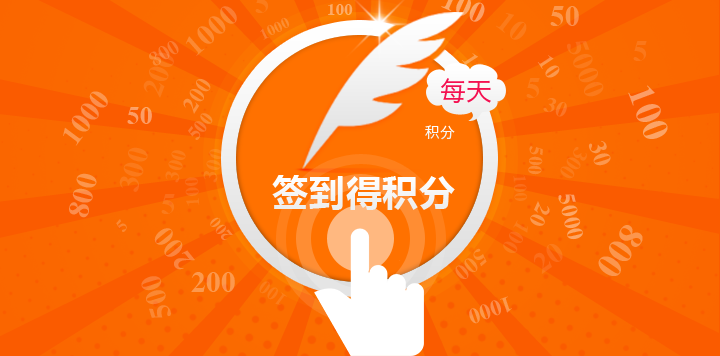
<style>
.page{position:relative;width:720px;height:356px}
.page>*{position:absolute;margin:0}
.t1{font:29px "CTLaoSongSJ";letter-spacing:0.02em;color:#fc8933}
.t2{font:29px "CTLaoSongSJ";letter-spacing:0.02em;color:#fb7b1a}
.t3{font:16.7px "CTLaoSongSJ";letter-spacing:0.02em;color:#fdab66}
.t4{font:29px "CTLaoSongSJ";letter-spacing:0.02em;color:#fc974d}
.t5{font:15px "CTLaoSongSJ";letter-spacing:0.02em;color:#fc8e33}
.t6{font:29px "CTLaoSongSJ";letter-spacing:0.02em;color:#fb7a1a}
.t7{font:20.6px "CTLaoSongSJ";letter-spacing:0.02em;color:#fb7c33}
.t8{font:29px "CTLaoSongSJ";letter-spacing:0.02em;color:#fb791a}
.t9{font:29px "CTLaoSongSJ";letter-spacing:0.02em;color:#fb771a}
.t10{font:21.8px "CTLaoSongSJ";letter-spacing:0.02em;color:#fc984d}
.t11{font:26.6px "HiraginoSansGB-W3";letter-spacing:0.02em;color:#f41151}
.t12{font:22.4px "CTLaoSongSJ";letter-spacing:0.02em;color:#fc9140}
.t13{font:36.2px "CTLaoSongSJ";letter-spacing:0.02em;color:#fc9d66}
.t14{font:29px "CTLaoSongSJ";letter-spacing:0.02em;color:#fc8d4d}
.t15{font:21.7px "CTLaoSongSJ";letter-spacing:0.02em;color:#fc8227}
.t16{font:25.1px "CTLaoSongSJ";letter-spacing:0.02em;color:#fc9d66}
.t17{font:18.9px "CTLaoSongSJ";letter-spacing:0.02em;color:#fb7c33}
.t18{font:14.7px "HiraginoSansGB-W3";letter-spacing:0.02em;color:#ffffff}
.t19{font:20.6px "CTLaoSongSJ";letter-spacing:0.02em;color:#fb7b1a}
.t20{font:18.9px "CTLaoSongSJ";letter-spacing:0.02em;color:#fc8933}
.t21{font:21.6px "CTLaoSongSJ";letter-spacing:0.02em;color:#fb7a1a}
.t22{font:24.6px "CTLaoSongSJ";letter-spacing:0.02em;color:#fc974d}
.t23{font:18.6px "CTLaoSongSJ";letter-spacing:0.02em;color:#fb6c1a}
.t24{font:36.5px "MicrosoftYaHei-Bold";letter-spacing:0.02em;color:#ffffff}
.t25{font:17.8px "CTLaoSongSJ";letter-spacing:0.02em;color:#fb711a}
.t26{font:29px "CTLaoSongSJ";letter-spacing:0.02em;color:#fb751a}
.t27{font:23px "CTLaoSongSJ";letter-spacing:0.02em;color:#fda666}
.t28{font:22px "CTLaoSongSJ";letter-spacing:0.02em;color:#fc984d}
.t29{font:17.3px "CTLaoSongSJ";letter-spacing:0.02em;color:#fb8833}
.t30{font:16.5px "CTLaoSongSJ";letter-spacing:0.02em;color:#fb8940}
.t31{font:21.6px "CTLaoSongSJ";letter-spacing:0.02em;color:#fb6c1a}
.t32{font:29px "CTLaoSongSJ";letter-spacing:0.02em;color:#fc9040}
.t33{font:35.7px "CTLaoSongSJ";letter-spacing:0.02em;color:#fc964d}
.t34{font:29px "CTLaoSongSJ";letter-spacing:0.02em;color:#fb6c1a}
.t35{font:29px "CTLaoSongSJ";letter-spacing:0.02em;color:#fb8733}
.t36{font:29px "CTLaoSongSJ";letter-spacing:0.02em;color:#fc984d}
.t37{font:18.6px "CTLaoSongSJ";letter-spacing:0.02em;color:#fb7b1a}
.t38{font:21.8px "CTLaoSongSJ";letter-spacing:0.02em;color:#fc944d}
</style>
<div class="page">
<p class="t1" style="left:185px;top:6px;width:52px;height:50px;rotate:-42deg">1000</p>
<p class="t2" style="left:255px;top:0px;width:14px;height:13px">5</p>
<p class="t3" style="left:328px;top:4px;width:25px;height:11px">100</p>
<p class="t4" style="left:550px;top:6px;width:29px;height:20px">50</p>
<p class="t5" style="left:260px;top:17px;width:30px;height:23px;rotate:-26deg">1000</p>
<p class="t6" style="left:496px;top:13px;width:31px;height:27px;rotate:38deg">10</p>
<p class="t7" style="left:149px;top:41px;width:30px;height:25px;rotate:-33deg">800</p>
<p class="t8" style="left:567px;top:41px;width:37px;height:56px;rotate:69deg">5000</p>
<p class="t9" style="left:633px;top:41px;width:14px;height:20px">5</p>
<p class="t6" style="left:143px;top:52px;width:31px;height:46px;rotate:-69deg">200</p>
<p class="t10" style="left:537px;top:55px;width:23px;height:23px;rotate:57deg">10</p>
<p class="t11" style="left:441px;top:78px;width:50px;height:25px">每天</p>
<p class="t2" style="left:526px;top:78px;width:14px;height:20px">5</p>
<p class="t12" style="left:183px;top:79px;width:28px;height:35px;rotate:-58deg">200</p>
<p class="t13" style="left:628px;top:85px;width:40px;height:54px;rotate:69deg">100</p>
<p class="t14" style="left:63px;top:91px;width:45px;height:55px;rotate:-53deg">1000</p>
<p class="t15" style="left:543px;top:98px;width:24px;height:19px;rotate:21deg">30</p>
<p class="t16" style="left:127px;top:107px;width:25px;height:17px">50</p>
<p class="t17" style="left:188px;top:113px;width:25px;height:27px;rotate:-53deg">500</p>
<p class="t18" style="left:425px;top:125px;width:30px;height:15px">积分</p>
<p class="t8" style="left:119px;top:147px;width:29px;height:45px;rotate:-74deg">300</p>
<p class="t19" style="left:165px;top:150px;width:21px;height:33px;rotate:-74deg">300</p>
<p class="t20" style="left:528px;top:146px;width:15px;height:29px;rotate:93deg">500</p>
<p class="t21" style="left:560px;top:147px;width:27px;height:32px;rotate:123deg">300</p>
<p class="t22" style="left:588px;top:140px;width:23px;height:26px;rotate:72deg">30</p>
<p class="t14" style="left:69px;top:173px;width:28px;height:45px;rotate:-76deg">800</p>
<p class="t23" style="left:185px;top:177px;width:15px;height:29px;rotate:-94deg">100</p>
<p class="t24" style="left:272px;top:175px;width:183px;height:35px">签到得积分</p>
<p class="t25" style="left:513px;top:175px;width:14px;height:26px;rotate:87deg">100</p>
<p class="t26" style="left:161px;top:194px;width:14px;height:20px">5</p>
<p class="t27" style="left:558px;top:194px;width:25px;height:46px;rotate:77deg">5000</p>
<p class="t28" style="left:530px;top:201px;width:20px;height:25px;rotate:114deg">20</p>
<p class="t29" style="left:116px;top:219px;width:11px;height:13px;rotate:-48deg">5</p>
<p class="t30" style="left:210px;top:217px;width:23px;height:23px;rotate:-129deg">200</p>
<p class="t31" style="left:503px;top:220px;width:25px;height:33px;rotate:120deg">100</p>
<p class="t32" style="left:154px;top:228px;width:41px;height:42px;rotate:-129deg">200</p>
<p class="t33" style="left:598px;top:225px;width:45px;height:51px;rotate:124deg">800</p>
<p class="t34" style="left:534px;top:243px;width:29px;height:31px;rotate:-36deg">20</p>
<p class="t35" style="left:141px;top:276px;width:30px;height:42px;rotate:-107deg">500</p>
<p class="t36" style="left:191px;top:272px;width:44px;height:20px">200</p>
<p class="t37" style="left:259px;top:281px;width:28px;height:24px;rotate:-144deg">100</p>
<p class="t38" style="left:469px;top:296px;width:43px;height:28px;rotate:161deg">1000</p>
</div>
